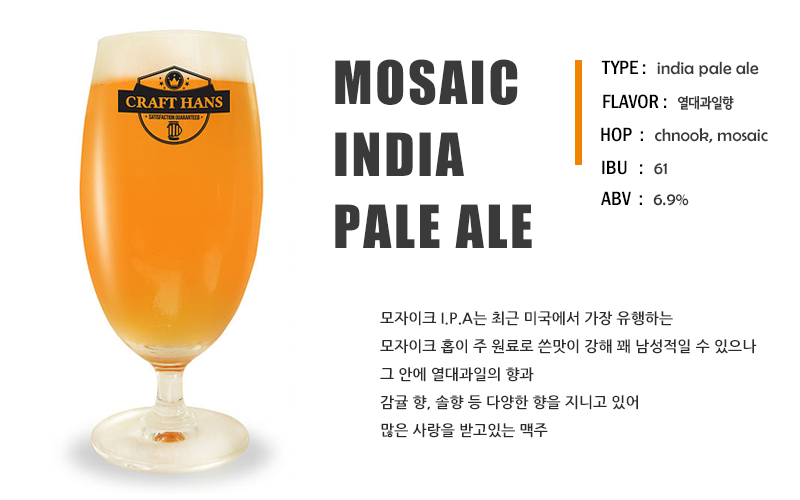
<style>
.page{position:relative;width:800px;height:500px;background:#ffffff}
.page>*{position:absolute;margin:0}
.t1{font:55px/72px "Impact";letter-spacing:0.05em;color:#3a3a3a}
.t2{font:18px "BerlinSansFB-Reg";color:#3a3a3a}
.t3{font:20px "FranklinGothic-MediumCond";color:#000000}
.t4{font:14px "SeN-CBL";color:#3a3a3a}
.t5{font:15px/28px "NanumGothicBold";color:#2b2b2b}
</style>
<div class="page">
<p class="t1" style="left:335px;top:59px;width:197px;height:189px">MOSAIC<br>INDIA<br>PALE ALE</p>
<p class="t2" style="left:601px;top:60px;width:158px;height:17px"><span class="t3">TYPE :  </span>india pale ale</p>
<p class="t3" style="left:603px;top:94px;width:131px;height:16px">FLAVOR :  <span class="t4">열대과일향</span></p>
<p class="t2" style="left:601px;top:127px;width:167px;height:16px"><span class="t3">HOP  :  </span>chnook, mosaic</p>
<p class="t3" style="left:602px;top:160px;width:65px;height:15px">IBU   :  <span class="t2">61</span></p>
<p class="t3" style="left:601px;top:191px;width:88px;height:15px">ABV  :  <span class="t2">6.9%</span></p>
<p class="t5" style="left:380px;top:311px;width:377px;height:127px">모자이크 I.P.A는 최근 미국에서 가장 유행하는 <br>모자이크 홉이 주 원료로 쓴맛이 강해 꽤 남성적일 수 있으나 <br>그 안에 열대과일의 향과 <br>감귤 향, 솔향 등 다양한 향을 지니고 있어 <br>많은 사랑을 받고있는 맥주</p>
</div>
